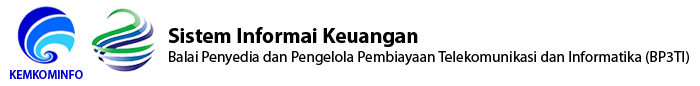
<style>
.page{position:relative;width:700px;height:86px;background:#ffffff}
.page>*{position:absolute;margin:0}
.t1{font:15.3px "MyriadPro-Regular";color:#000000}
.t2{font:21.3px "MyriadPro-Bold";color:#000000}
.t3{font:12px "MyriadPro-Semibold";color:#0000cc}
</style>
<div class="page">
<p class="t1" style="left:168px;top:27px;width:521px;height:38px"><span class="t2">Sistem Informai Keuangan<br></span>Balai Penyedia dan Pengelola Pembiayaan Telekomunikasi dan Informatika (BP3TI)</p>
<p class="t3" style="left:10px;top:70px;width:73px;height:9px">KEMKOMINFO</p>
</div>
